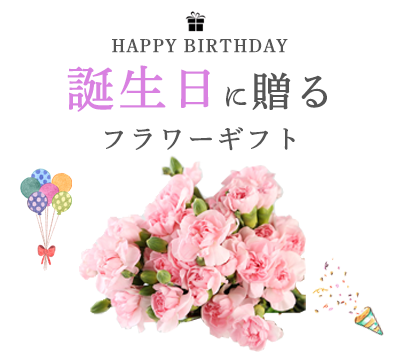
<style>
.page{position:relative;width:400px;height:360px;background:#ffffff}
.page>*{position:absolute;margin:0}
.t1{font:18.7px "DNPShueiMinPr6-M";letter-spacing:0.05em;color:#555555;font-weight:bold}
.t2{font:26.7px/21.3px "DNPShueiMinPr6-M";letter-spacing:0.05em;color:#555555;font-weight:bold}
.t3{font:48px/21.3px "DNPShueiMinPr6-M";letter-spacing:0.05em;color:#d981e1;font-weight:bold}
.t4{font:40px/21.3px "DNPShueiMinPr6-M";letter-spacing:0.05em;color:#555555;font-weight:bold}
</style>
<div class="page">
<p class="t1" style="left:112px;top:38px;width:176px;height:15px">HAPPY BIRTHDAY</p>
<p class="t2" style="left:67px;top:65px;width:260px;height:86px;text-align:center"><span class="t3">誕生日</span>に<span class="t4">贈る<br></span><br>フラワーギフト</p>
</div>
